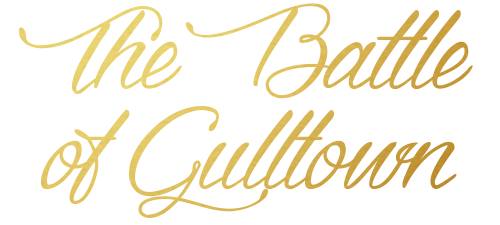
<style>
.page{position:relative;width:500px;height:225px;background:#ffffff}
.page>*{position:absolute;margin:0}
.t1{font:250px "DragonisComing"}
</style>
<div class="page">
<p class="t1" style="left:19px;top:3px;width:454px;height:215px">The Battle of Gulltown</p>
</div>
